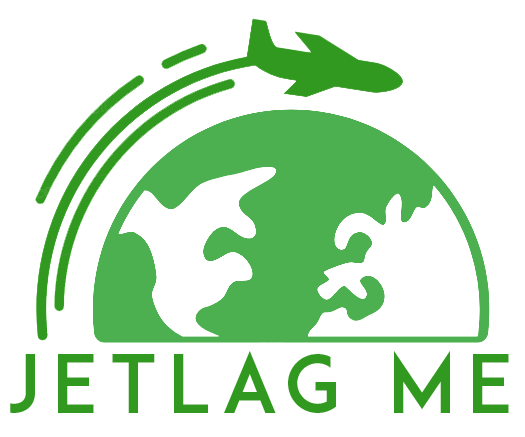
<style>
.page{position:relative;width:525px;height:437px;background:#ffffff}
.page>*{position:absolute;margin:0}
.t1{font:80px "ADAM.CGPRO";letter-spacing:0.14em;color:#31991f}
</style>
<div class="page">
<p class="t1" style="left:10px;top:351px;width:499px;height:62px">Jetlag Me</p>
</div>
